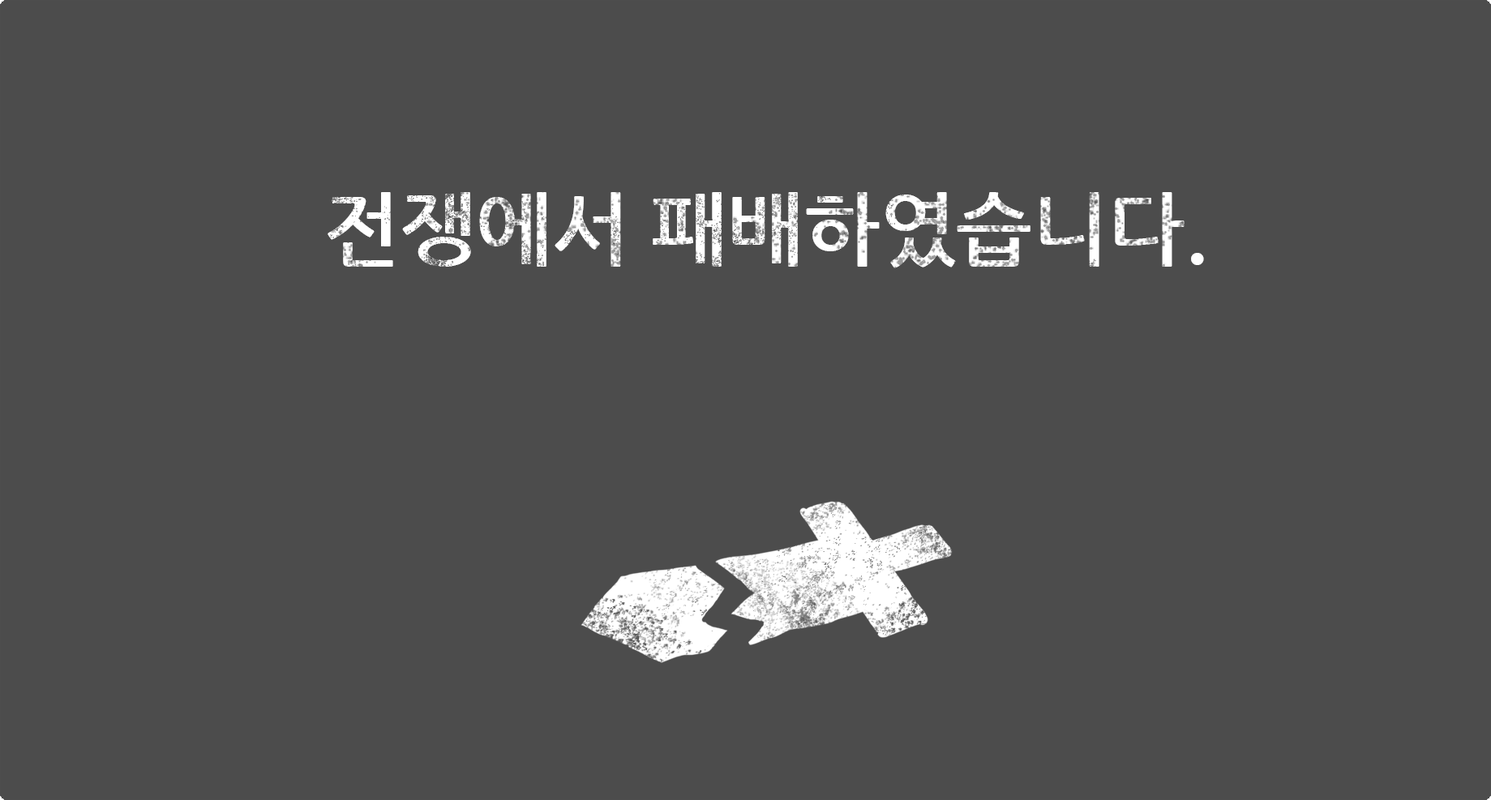
<style>
.page{position:relative;width:1491px;height:800px;background:#4c4c4c}
.page>*{position:absolute;margin:0}
.t1{font:81.1px "NanumGothicBold";color:#ffffff}
</style>
<div class="page">
<p class="t1" style="left:327px;top:192px;width:877px;height:76px">전쟁에서 패배하였습니다.</p>
</div>
